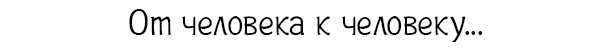
<style>
.page{position:relative;width:612px;height:49px;background:#ffffff}
.page>*{position:absolute;margin:0}
.t1{font:37px "Plainot";color:#000000}
</style>
<div class="page">
<p class="t1" style="left:129px;top:9px;width:354px;height:34px">От человека к человеку...</p>
</div>
